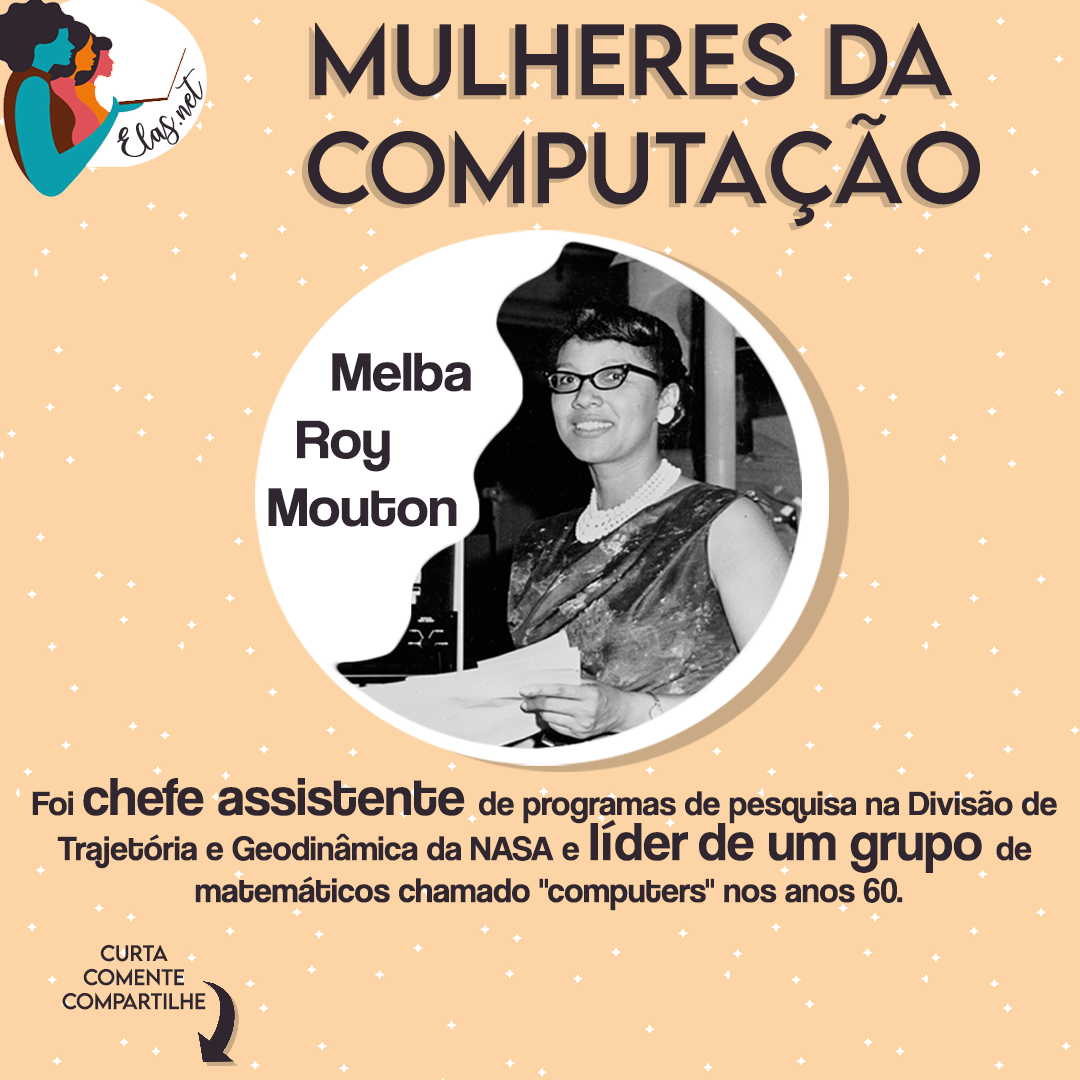
<style>
.page{position:relative;width:1080px;height:1080px;background:#fcd4a5}
.page>*{position:absolute;margin:0}
.t1{font:90px "LEMONMILK-Regular"}
.t2{font:90px "LEMONMILK-Regular";color:#2f262f}
.t3{font:25px "charlinda-Regular";color:#2f262f;scale:1.18 1}
.t4{font:56.3px "CoolveticaRg-Regular";color:#2f262f;scale:1.05 1}
.t5{font:60.1px "CoolveticaRg-Regular";color:#ffffff;scale:1.05 1}
.t6{font:35px/45px "CoolveticaRg-Regular";color:#2f262f}
.t7{font:55px/45px "CoolveticaRg-Regular";color:#2f262f}
.t8{font:35px "CoolveticaRg-Regular";color:#2f262f}
.t9{font:20px "LEMONMILK-Regular";color:#2f262f}
</style>
<div class="page">
<p class="t1" style="left:302px;top:26px;width:672px;height:205px;text-align:center">Mulheres da <br>Computação</p>
<p class="t2" style="left:308px;top:22px;width:672px;height:205px;text-align:center">Mulheres da <br>Computação</p>
<p class="t3" style="left:117px;top:68px;width:86px;height:89px;rotate:-43deg">Elas.net</p>
<p class="t4" style="left:268px;top:352px;width:203px;height:175px"><span class="t5">       </span>   Melba <br>        Roy <br>      Mouton</p>
<p class="t6" style="left:32px;top:778px;width:1025px;height:133px;text-align:center">Foi <span class="t7">chefe assistente </span>de programas de pesquisa na Divisão de <br>Trajetória e Geodinâmica da NASA e <span class="t7">líder de um grupo </span>de <br><span class="t8">matemáticos chamado "computers" nos anos 60.</span></p>
<p class="t9" style="left:62px;top:944px;width:144px;height:66px;text-align:center">Curta<br>Comente<br>Compartilhe</p>
</div>
